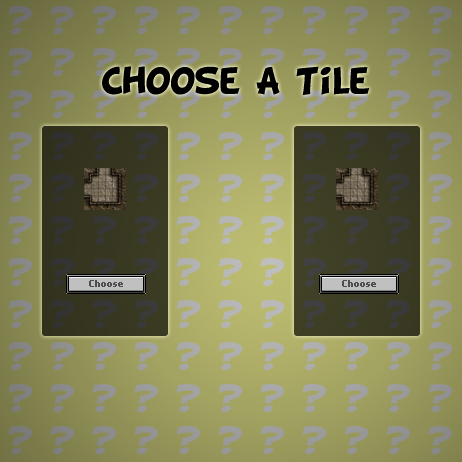
<style>
.page{position:relative;width:462px;height:462px}
.page>*{position:absolute;margin:0}
.t1{font:30px "BDCartoonShout";color:#000000}
</style>
<div class="page">
<p class="t1" style="left:102px;top:66px;width:268px;height:29px">Choose A Tile</p>
</div>
